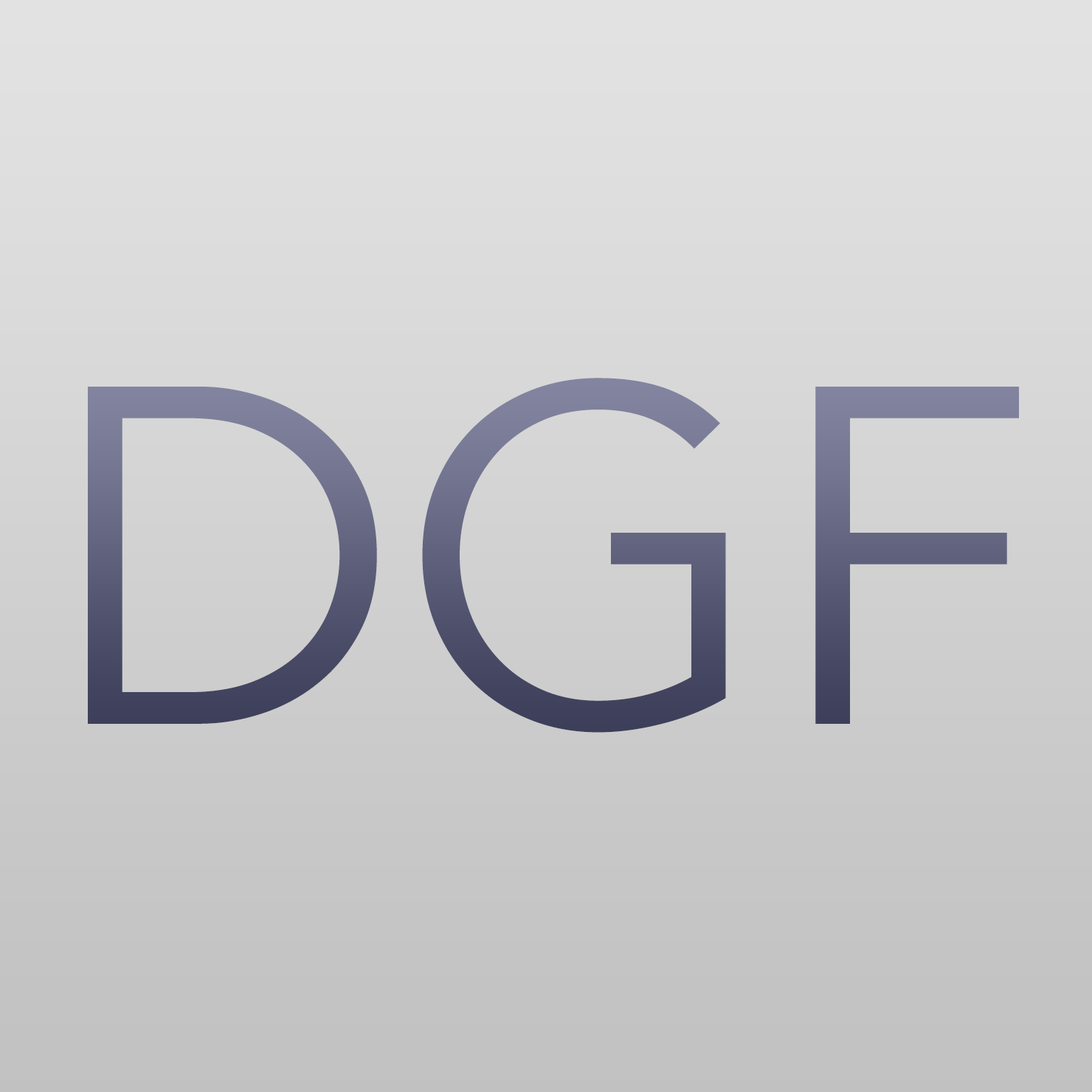
<style>
.page{position:relative;width:1092px;height:1092px}
.page>*{position:absolute;margin:0}
.t1{font:475.9px "Avenir-Book"}
</style>
<div class="page">
<p class="t1" style="left:88px;top:378px;width:931px;height:355px">DGF</p>
</div>
